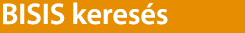
<style>
.page{position:relative;width:245px;height:33px;background:#e68d00}
.page>*{position:absolute;margin:0}
.t1{font:30px "MyriadPro-Semibold";color:#ffffff}
</style>
<div class="page">
<p class="t1" style="left:3px;top:2px;width:165px;height:23px">BISIS keresés</p>
</div>
